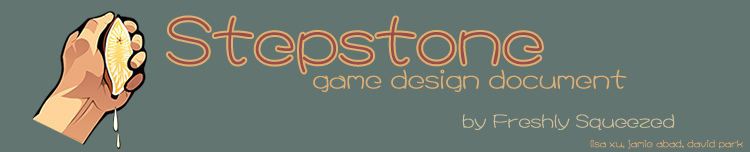
<style>
.page{position:relative;width:750px;height:152px;background:#627571}
.page>*{position:absolute;margin:0}
.t1{font:60px "DFYuanYuan-W2-HKP-BF";color:#994e49;font-weight:bold}
.t2{font:24px "DFYuanYuan-W2-HKP-BF";color:#dfb073;font-weight:bold}
.t3{font:16.9px "DFYuanYuan-W2-HKP-BF";color:#d2c19d;font-weight:bold}
.t4{font:9px "DFYuanYuan-W2-HKP-BF";color:#dfb073;font-weight:bold}
</style>
<div class="page">
<p class="t1" style="left:168px;top:17px;width:374px;height:56px">Stepstone</p>
<p class="t2" style="left:313px;top:69px;width:314px;height:23px">game design document</p>
<p class="t3" style="left:462px;top:114px;width:213px;height:16px">by Freshly Squeezed</p>
<p class="t4" style="left:590px;top:140px;width:153px;height:9px">lisa xu, jamie abad, david park</p>
</div>
